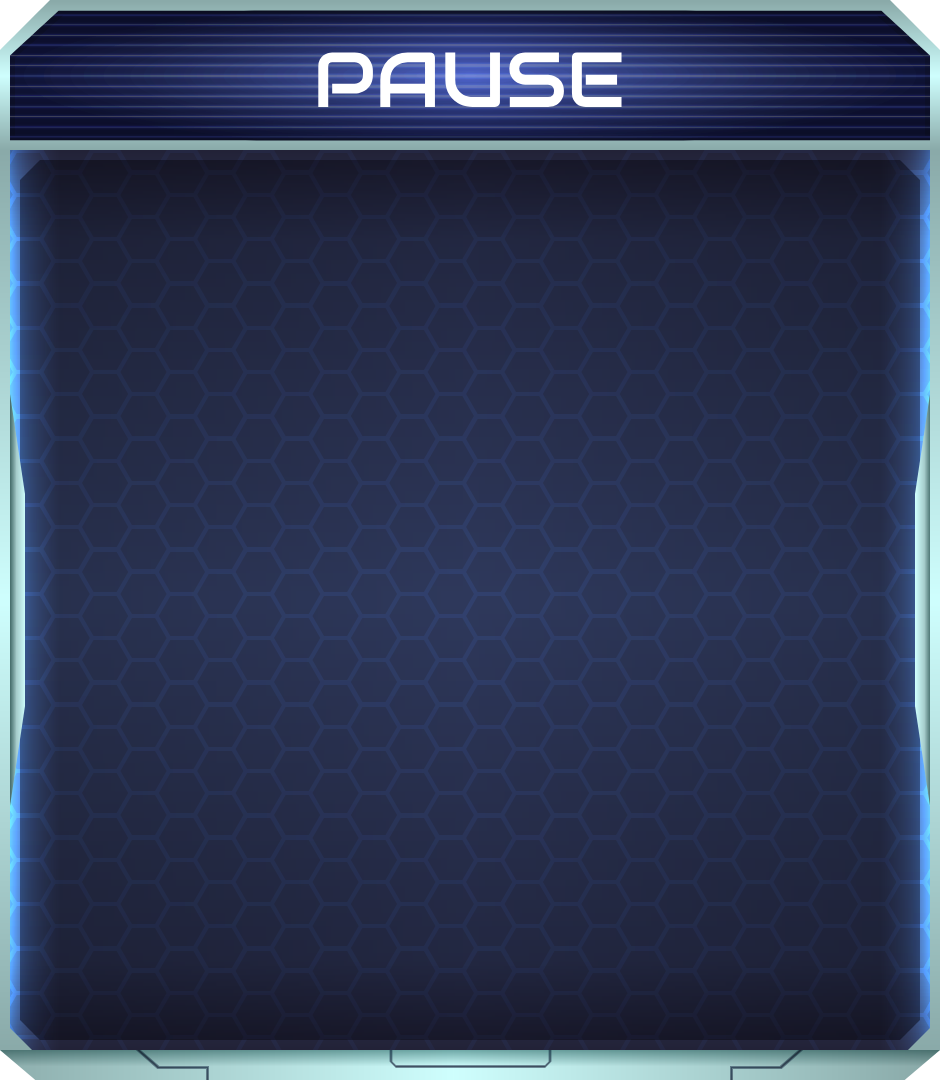
<style>
.page{position:relative;width:940px;height:1080px}
.page>*{position:absolute;margin:0}
.t1{font:78px "Audiowide-Regular";color:#ffffff}
</style>
<div class="page">
<p class="t1" style="left:318px;top:52px;width:304px;height:55px">PAUSE</p>
</div>
